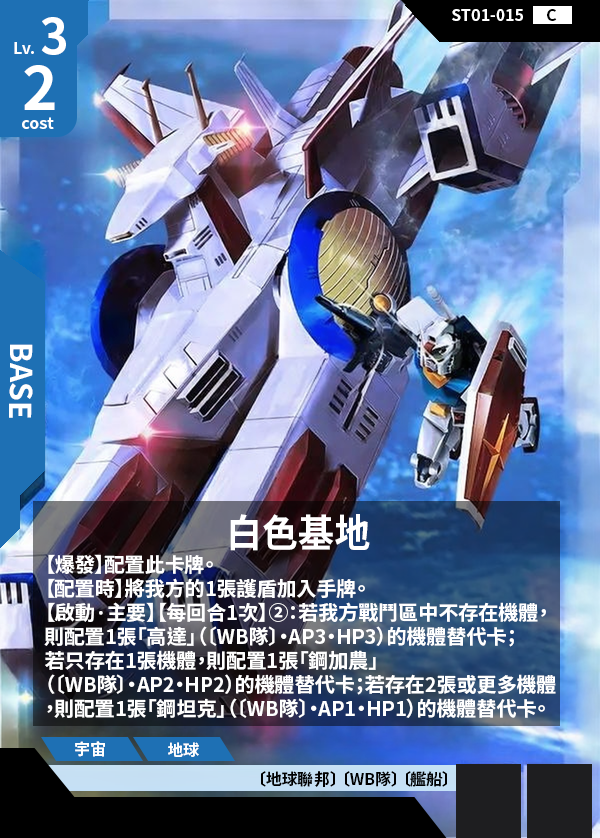
<style>
.page{position:relative;width:600px;height:838px}
.page>*{position:absolute;margin:0}
.t1{font:48px "NotoSansCJKtc-Bold";color:#ffffff}
.t2{font:16px "NotoSansCJKtc-Bold";color:#ffffff}
.t3{font:16px "NotoSansCJKtc-Bold";color:#000000}
.t4{font:60px "NotoSansCJKtc-Bold";color:#ffffff}
.t5{font:30px "NotoSansCJKtc-Bold";color:#ffffff}
.t6{font:38.4px "NotoSansCJKtc-Bold";color:#ffffff;scale:0.94 1}
.t7{font:20px "NotoSansCJKtc-Bold";color:#ffffff}
</style>
<div class="page">
<p class="t1" style="left:41px;top:17px;width:25px;height:38px">3</p>
<p class="t2" style="left:452px;top:9px;width:71px;height:12px">ST01-015</p>
<p class="t3" style="left:547px;top:9px;width:10px;height:12px">C</p>
<p class="t2" style="left:14px;top:42px;width:20px;height:12px">Lv.</p>
<p class="t4" style="left:24px;top:65px;width:31px;height:45px">2</p>
<p class="t2" style="left:22px;top:117px;width:32px;height:12px">cost</p>
<p class="t5" style="left:9px;top:344px;width:24px;height:74px;rotate:90deg">BASE</p>
<p class="t6" style="left:230px;top:514px;width:140px;height:37px">白色基地</p>
<p class="t7" style="left:44px;top:554px;width:512px;height:164px">【爆發】配置此卡牌。<br>【配置時】將我方的1張護盾加入手牌。<br>【啟動·主要】【每回合1次】②：若我方戰鬥區中不存在機體，<br>則配置1張「高達」（〔WB隊〕・AP3・HP3）的機體替代卡；<br>若只存在1張機體，則配置1張「鋼加農」<br>（〔WB隊〕・AP2・HP2）的機體替代卡；若存在2張或更多機體<br>，則配置1張「鋼坦克」（〔WB隊〕・AP1・HP1）的機體替代卡。</p>
<p class="t2" style="left:75px;top:741px;width:30px;height:16px">宇宙</p>
<p class="t2" style="left:168px;top:742px;width:31px;height:15px">地球</p>
<p class="t3" style="left:261px;top:771px;width:186px;height:16px">〔地球聯邦〕 〔WB隊〕 〔艦船〕</p>
</div>
